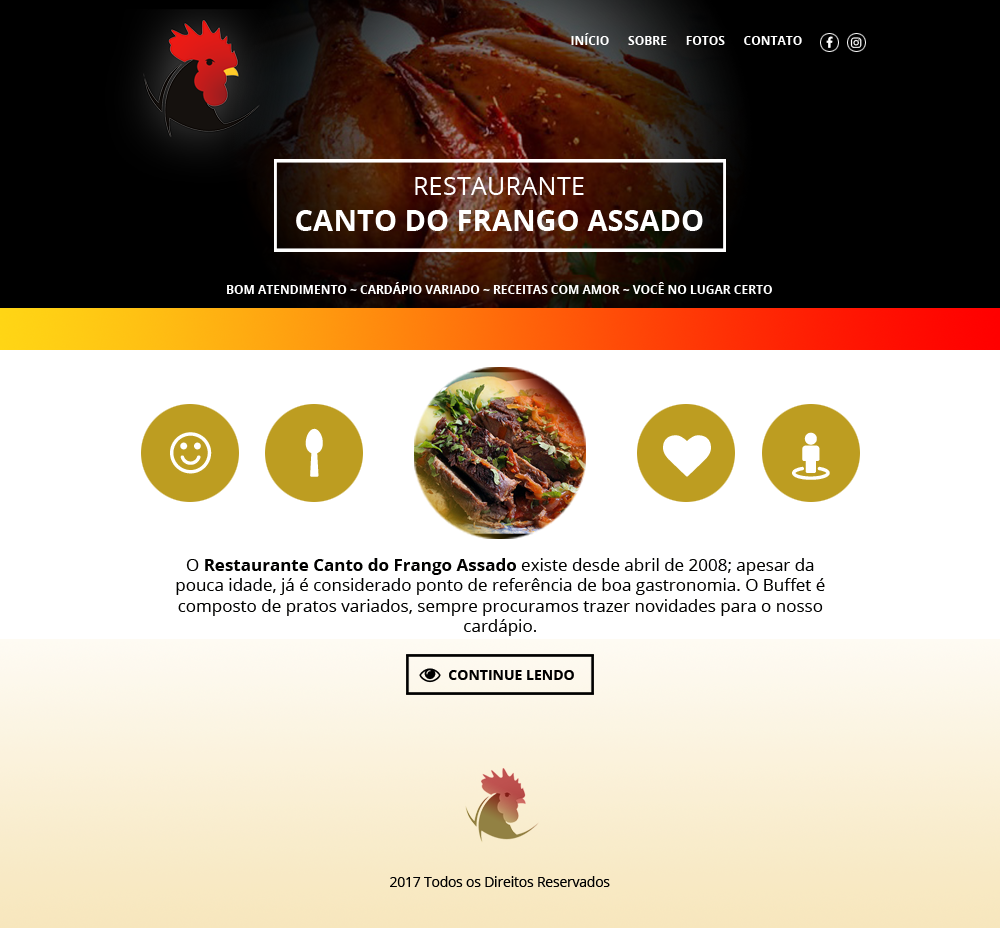
<style>
.page{position:relative;width:1000px;height:928px;background:#ffffff}
.page>*{position:absolute;margin:0}
.t1{font:12px "OpenSans-Bold";color:#ffffff}
.t2{font:25.5px "OpenSans";color:#ffffff}
.t3{font:29.1px "OpenSans-Bold";color:#ffffff}
.t4{font:17px "OpenSans";color:#010100}
.t5{font:17px "OpenSans-Bold";color:#010100}
.t6{font:14px "OpenSans-Bold";color:#000000}
.t7{font:13.5px "OpenSans";color:#000000}
</style>
<div class="page">
<p class="t1" style="left:571px;top:33px;width:231px;height:12px">INÍCIO      SOBRE      FOTOS      CONTATO</p>
<p class="t2" style="left:415px;top:177px;width:169px;height:18px">RESTAURANTE</p>
<p class="t3" style="left:296px;top:210px;width:407px;height:21px">CANTO DO FRANGO ASSADO</p>
<p class="t1" style="left:227px;top:282px;width:545px;height:12px">BOM ATENDIMENTO ~ CARDÁPIO VARIADO ~ RECEITAS COM AMOR ~ VOCÊ NO LUGAR CERTO</p>
<p class="t4" style="left:176px;top:558px;width:649px;height:78px;text-align:center">O <span class="t5">Restaurante Canto do Frango Assado </span>existe desde abril de 2008; apesar da pouca idade, já é considerado ponto de referência de boa gastronomia. O Buffet é composto de pratos variados, sempre procuramos trazer novidades para o nosso cardápio.</p>
<p class="t6" style="left:449px;top:670px;width:125px;height:10px">CONTINUE LENDO</p>
<p class="t7" style="left:390px;top:876px;width:220px;height:11px">2017 Todos os Direitos Reservados</p>
</div>
